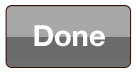
<style>
.page{position:relative;width:137px;height:72px;background:#a8a8a8}
.page>*{position:absolute;margin:0}
.t1{font:29.2px "HelveticaNeue-Bold";color:#ffffff}
</style>
<div class="page">
<p class="t1" style="left:34px;top:25px;width:71px;height:22px">Done</p>
</div>
